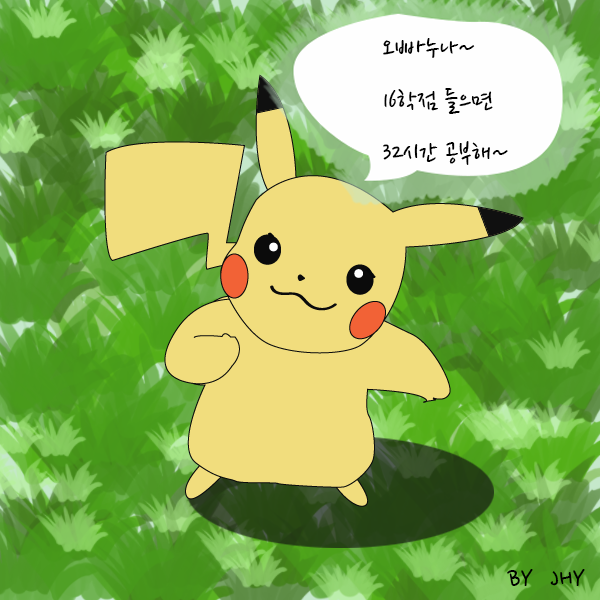
<style>
.page{position:relative;width:600px;height:600px}
.page>*{position:absolute;margin:0}
.t1{font:30px "NanumPen";color:#000000}
</style>
<div class="page">
<p class="t1" style="left:383px;top:38px;width:125px;height:127px">오빠누나~ <br>16학점 들으면<br>32시간 공부해~</p>
<p class="t1" style="left:507px;top:569px;width:78px;height:17px">BY  JHY</p>
</div>
